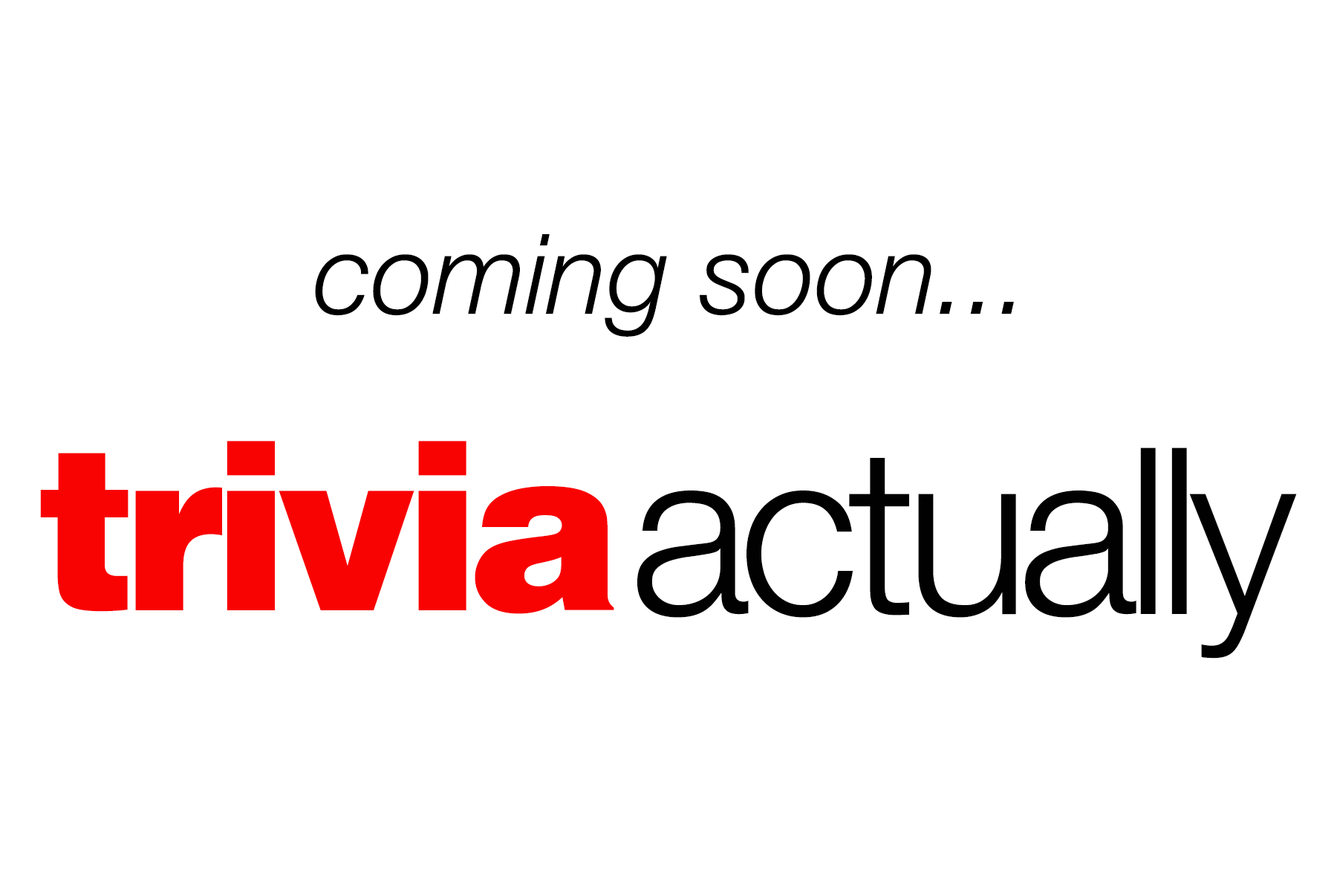
<style>
.page{position:relative;width:1337px;height:892px;background:#ffffff}
.page>*{position:absolute;margin:0}
.t1{font:111.5px "HelveticaNeue-LightItalic";color:#000000}
.t2{font:232.2px "Helvetica-Black";letter-spacing:-0.06em;color:#f90202}
.t3{font:232.2px "HelveticaNeue-Light";letter-spacing:-0.05em;color:#010101}
</style>
<div class="page">
<p class="t1" style="left:315px;top:234px;width:699px;height:103px">coming soon...</p>
<p class="t2" style="left:40px;top:441px;width:574px;height:173px">trivia</p>
<p class="t3" style="left:637px;top:447px;width:660px;height:211px">actually</p>
</div>
